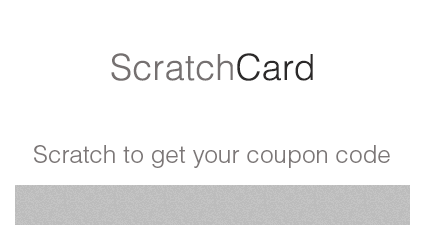
<style>
.page{position:relative;width:425px;height:240px;background:#ffffff}
.page>*{position:absolute;margin:0}
.t1{font:36px "HelveticaLTStd-Light";letter-spacing:0.006em;color:#757070}
.t2{font:36px "HelveticaLTStd-Light";letter-spacing:0.006em;color:#2b2929}
.t3{font:24px "HelveticaLTStd-Light";letter-spacing:0.006em;color:#7c7777}
</style>
<div class="page">
<p class="t1" style="left:111px;top:53px;width:202px;height:28px">Scratch<span class="t2">Card</span></p>
<p class="t3" style="left:34px;top:145px;width:356px;height:23px">Scratch to get your coupon code</p>
</div>
